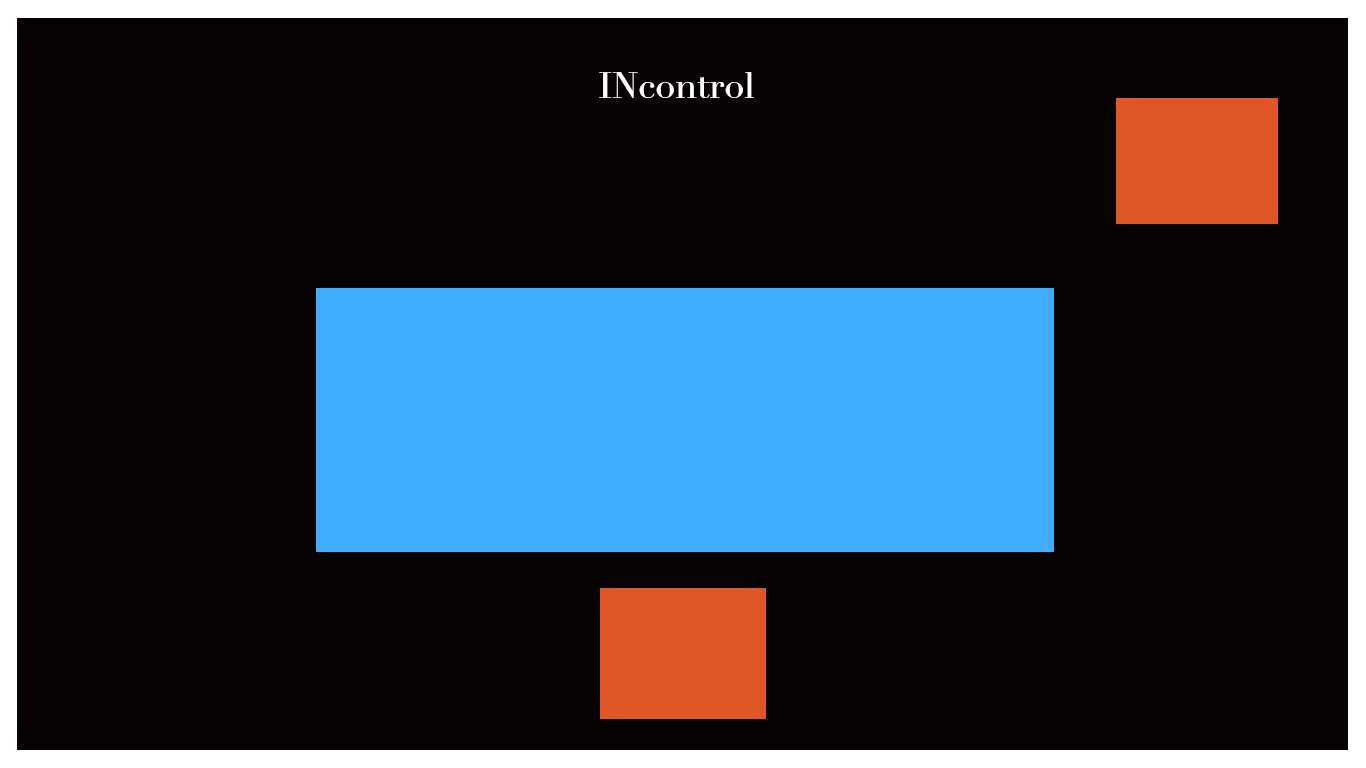
<style>
.page{position:relative;width:1366px;height:768px;background:#060302}
.page>*{position:absolute;margin:0}
.t1{font:36px "DidotLTPro-Roman";color:#ffffff}
</style>
<div class="page">
<p class="t1" style="left:599px;top:72px;width:155px;height:26px">INcontrol</p>
</div>
